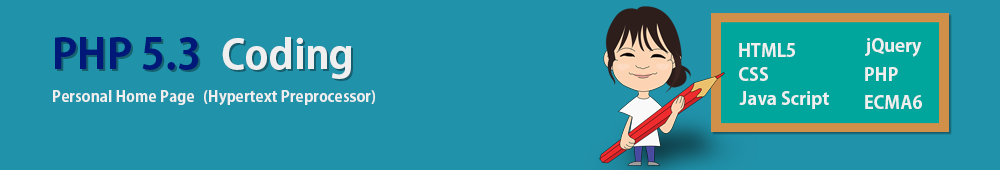
<style>
.page{position:relative;width:1000px;height:170px;background:#2092aa}
.page>*{position:absolute;margin:0}
.t1{font:42px "AdobeGothicStd-Bold";color:#001978}
.t2{font:40px "AdobeGothicStd-Bold";color:#efefef}
.t3{font:18px "AdobeGothicStd-Bold";color:#efefef}
.t4{font:15px "AdobeGothicStd-Bold";color:#efefef}
</style>
<div class="page">
<p class="t1" style="left:55px;top:37px;width:297px;height:42px">PHP 5.3  <span class="t2">Coding</span></p>
<p class="t3" style="left:865px;top:38px;width:57px;height:19px">jQuery</p>
<p class="t3" style="left:739px;top:43px;width:56px;height:14px">HTML5</p>
<p class="t3" style="left:739px;top:67px;width:29px;height:14px">CSS</p>
<p class="t3" style="left:865px;top:67px;width:33px;height:14px">PHP</p>
<p class="t4" style="left:53px;top:90px;width:141px;height:15px">Personal Home Page</p>
<p class="t4" style="left:204px;top:90px;width:171px;height:15px">(Hypertext Preprocessor)</p>
<p class="t3" style="left:739px;top:91px;width:90px;height:18px">Java Script</p>
<p class="t3" style="left:865px;top:95px;width:57px;height:14px">ECMA6</p>
</div>
